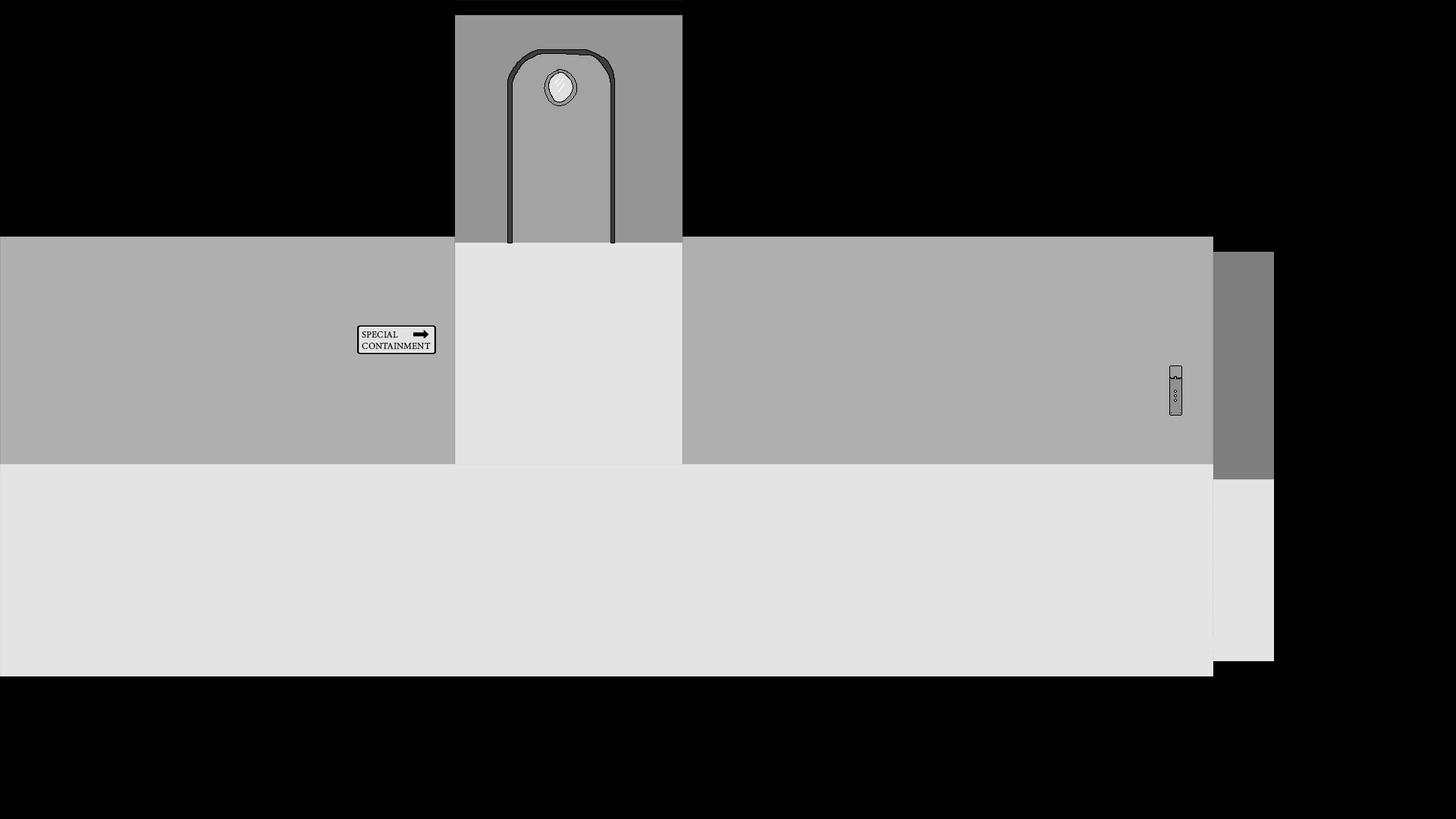
<style>
.page{position:relative;width:1456px;height:819px;background:#000000}
.page>*{position:absolute;margin:0}
.t1{font:9.1px "MinionVariableConcept-Roman";color:#000000}
</style>
<div class="page">
<p class="t1" style="left:362px;top:331px;width:69px;height:19px">SPECIAL<br>CONTAINMENT</p>
</div>
